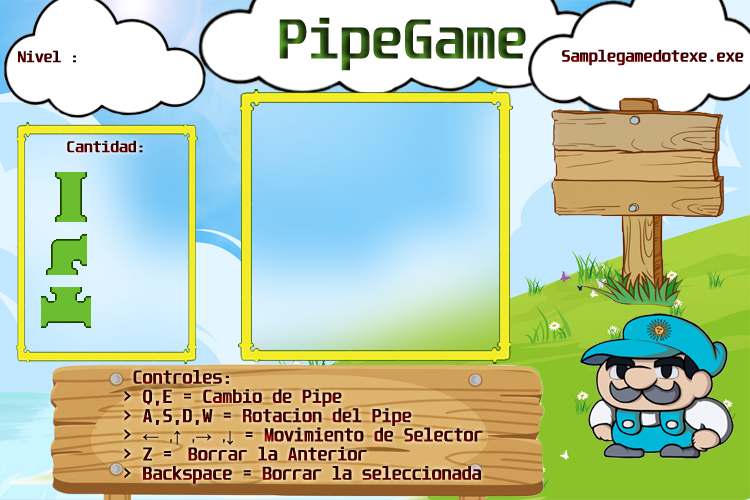
<style>
.page{position:relative;width:750px;height:500px}
.page>*{position:absolute;margin:0}
.t1{font:48px "Unispace-Bold";scale:1.07 1}
.t2{font:13.5px "Unispace-Bold";scale:1.07 1}
.t3{font:14px "Unispace-Bold";scale:1.07 1}
.t4{font:16px "Unispace-Bold"}
.t5{font:16px "TimesNewRomanPSMT"}
.t6{font:16px "UnicaOne-Regular"}
</style>
<div class="page">
<p class="t1" style="left:279px;top:17px;width:247px;height:54px">PipeGame</p>
<p class="t2" style="left:18px;top:50px;width:58px;height:13px">Nivel :</p>
<p class="t3" style="left:562px;top:49px;width:182px;height:17px">Samplegamedotexe.exe</p>
<p class="t2" style="left:67px;top:140px;width:76px;height:13px">Cantidad:</p>
<p class="t4" style="left:124px;top:370px;width:359px;height:114px">Controles:                       <br>&gt; Q,E = Cambio de Pipe<br>&gt; A,S,D,W = Rotacion del Pipe<br>&gt; <span class="t5">← </span><span class="t6">,</span><span class="t5">↑ </span><span class="t6">,</span><span class="t5">→ </span><span class="t6">,</span><span class="t5">↓</span> = Movimiento de Selector<br>&gt; Z =  Borrar la Anterior<br>&gt; Backspace = Borrar la seleccionada</p>
</div>
